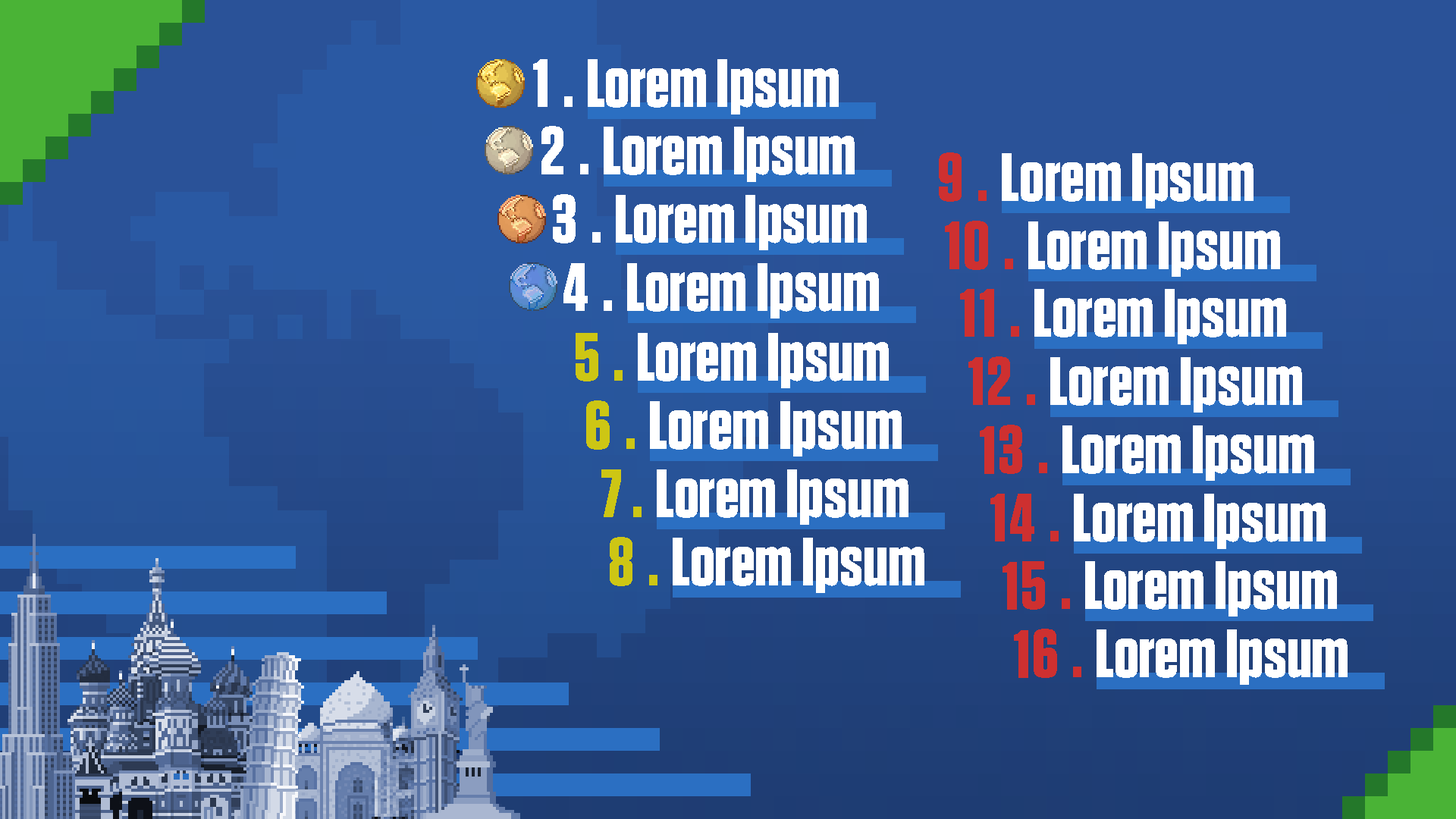
<style>
.page{position:relative;width:1456px;height:819px}
.page>*{position:absolute;margin:0}
.t1{font:68.2px/68px "Tungsten-Bold";letter-spacing:0.2em;color:#ffffff}
.t2{font:68.2px "Tungsten-Bold";color:#ffffff}
.t3{font:68.2px/68px "Tungsten-Bold";letter-spacing:0.2em;color:#cdc614}
</style>
<div class="page">
<p class="t1" style="left:533px;top:59px;width:79px;height:252px;text-align:center">1.<br>  2.<br>   3.<br>    4.</p>
<p class="t2" style="left:588px;top:59px;width:251px;height:56px">Lorem Ipsum</p>
<p class="t2" style="left:604px;top:127px;width:251px;height:55px">Lorem Ipsum</p>
<p class="t2" style="left:1002px;top:153px;width:252px;height:56px">Lorem Ipsum</p>
<p class="t2" style="left:616px;top:195px;width:251px;height:55px">Lorem Ipsum</p>
<p class="t2" style="left:1028px;top:221px;width:252px;height:56px">Lorem Ipsum</p>
<p class="t2" style="left:627px;top:263px;width:252px;height:55px">Lorem Ipsum</p>
<p class="t2" style="left:1034px;top:289px;width:252px;height:55px">Lorem Ipsum</p>
<p class="t3" style="left:576px;top:333px;width:81px;height:253px;text-align:center">5.<br> 6.<br>  7.<br>   8.</p>
<p class="t2" style="left:638px;top:333px;width:251px;height:55px">Lorem Ipsum</p>
<p class="t2" style="left:1050px;top:357px;width:252px;height:56px">Lorem Ipsum</p>
<p class="t2" style="left:650px;top:401px;width:252px;height:56px">Lorem Ipsum</p>
<p class="t2" style="left:1062px;top:425px;width:252px;height:56px">Lorem Ipsum</p>
<p class="t2" style="left:657px;top:469px;width:251px;height:56px">Lorem Ipsum</p>
<p class="t2" style="left:1074px;top:494px;width:252px;height:55px">Lorem Ipsum</p>
<p class="t2" style="left:673px;top:538px;width:251px;height:55px">Lorem Ipsum</p>
<p class="t2" style="left:1085px;top:561px;width:252px;height:56px">Lorem Ipsum</p>
<p class="t2" style="left:1097px;top:629px;width:251px;height:56px">Lorem Ipsum</p>
</div>
